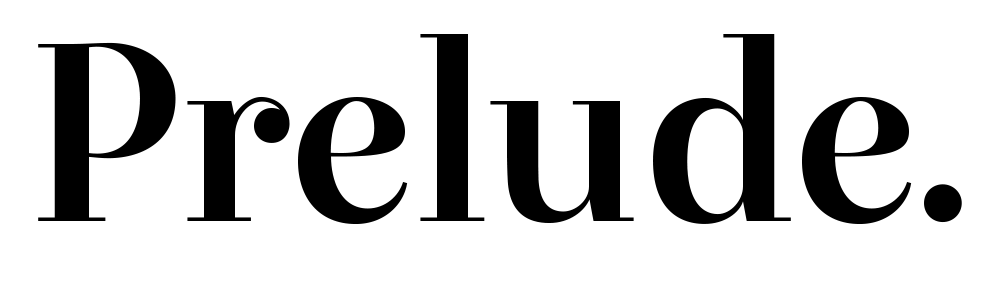
<style>
.page{position:relative;width:1000px;height:300px;background:#ffffff}
.page>*{position:absolute;margin:0}
.t1{font:457.8px "OtamaDisplay-Bold";letter-spacing:-0.005em;color:#000000}
</style>
<div class="page">
<p class="t1" style="left:38px;top:34px;width:924px;height:190px">Prelude.</p>
</div>
